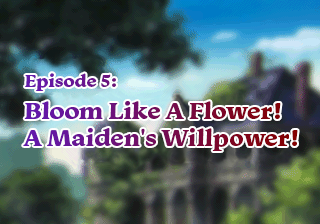
<style>
.page{position:relative;width:320px;height:224px}
.page>*{position:absolute;margin:0}
.t1{font:24px/27px "Monarcha-Bold"}
.t2{font:18px/30px "Monarcha-Bold"}
.t3{font:24px/30px "Monarcha-Bold"}
.t4{font:24px/32px "Monarcha-Bold"}
</style>
<div class="page">
<p class="t1" style="left:23px;top:73px;width:275px;height:78px"><span class="t2">Episode 5:<br></span><span class="t3">Bloom </span><span class="t4">Like </span><span class="t3">A Flower! <br></span>A Maiden's Willpower!</p>
</div>
